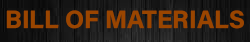
<style>
.page{position:relative;width:250px;height:42px}
.page>*{position:absolute;margin:0}
.t1{font:25px "AcuminConcept-Bold";color:#9a4500}
</style>
<div class="page">
<p class="t1" style="left:6px;top:10px;width:238px;height:19px">BILL OF MATERIALS</p>
</div>
